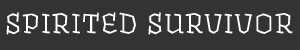
<style>
.page{position:relative;width:300px;height:50px;background:#333333}
.page>*{position:absolute;margin:0}
.t1{font:29.9px "Fakir-Regular";letter-spacing:0.05em;color:#ffffff;font-weight:bold}
</style>
<div class="page">
<p class="t1" style="left:6px;top:12px;width:287px;height:23px">SPIRITED SURVIVOR</p>
</div>
